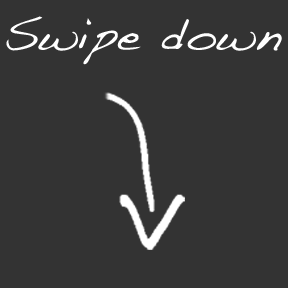
<style>
.page{position:relative;width:288px;height:288px;background:#333333}
.page>*{position:absolute;margin:0}
.t1{font:48px "Handwriting-Dakota";color:#ffffff}
</style>
<div class="page">
<p class="t1" style="left:6px;top:16px;width:276px;height:49px">Swipe down</p>
</div>
